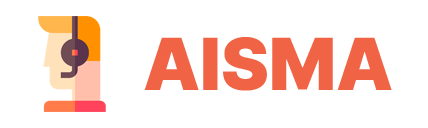
<style>
.page{position:relative;width:428px;height:128px;background:#ffffff}
.page>*{position:absolute;margin:0}
.t1{font:72px "Inter-Black";color:#f06445;text-transform:uppercase}
</style>
<div class="page">
<p class="t1" style="left:144px;top:37px;width:248px;height:54px">AISMA</p>
</div>
